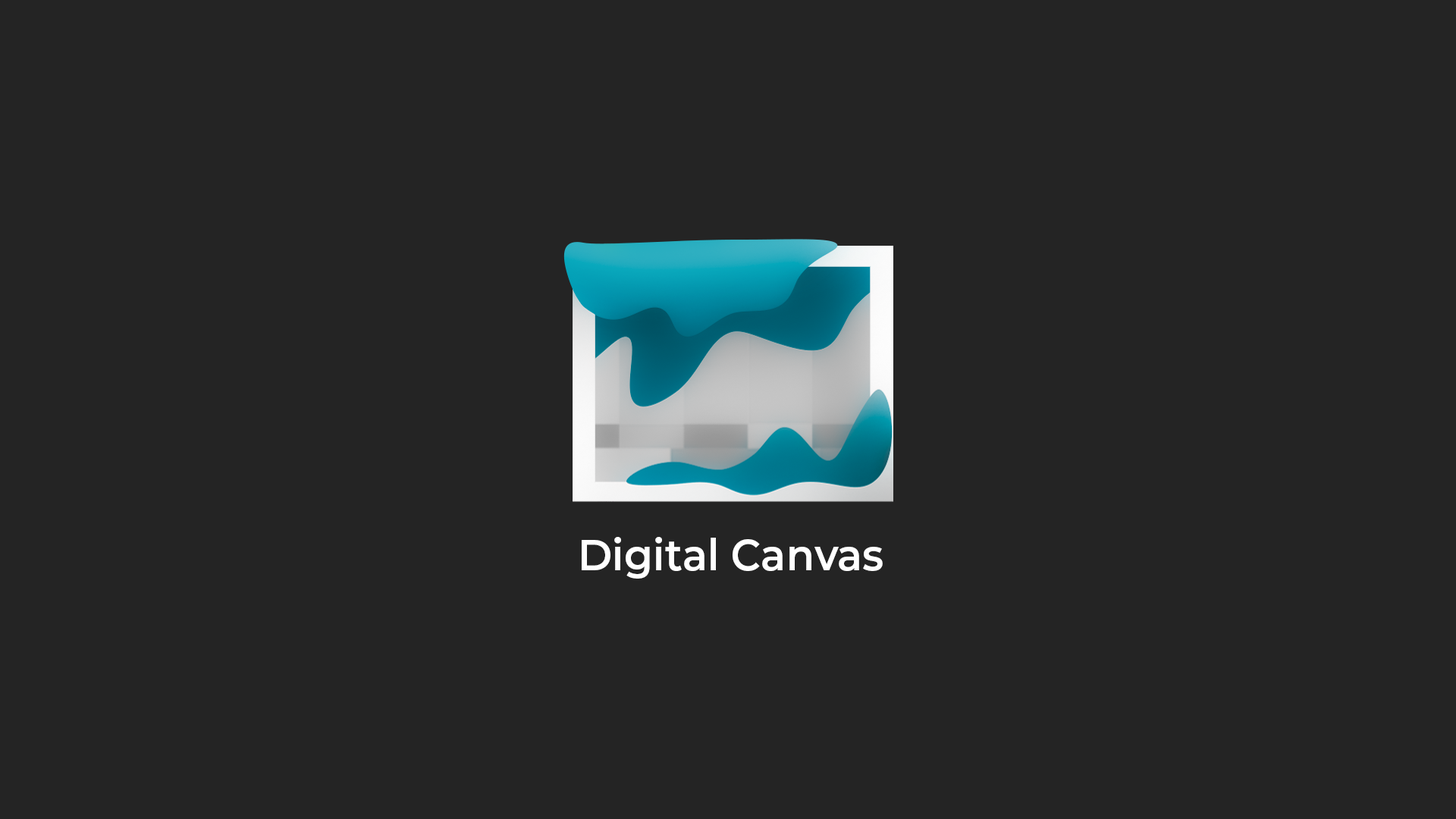
<style>
.page{position:relative;width:1456px;height:819px;background:#242424}
.page>*{position:absolute;margin:0}
.t1{font:43.5px "Montserrat-SemiBold";color:#ffffff;scale:0.95 1}
</style>
<div class="page">
<p class="t1" style="left:582px;top:537px;width:301px;height:42px">Digital Canvas</p>
</div>
